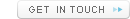
<style>
.page{position:relative;width:130px;height:19px}
.page>*{position:absolute;margin:0}
.t1{font:10px "ArialMT";color:#6c6c6c}
</style>
<div class="page">
<p class="t1" style="left:29px;top:6px;width:75px;height:7px">GET  IN TOUCH</p>
</div>
